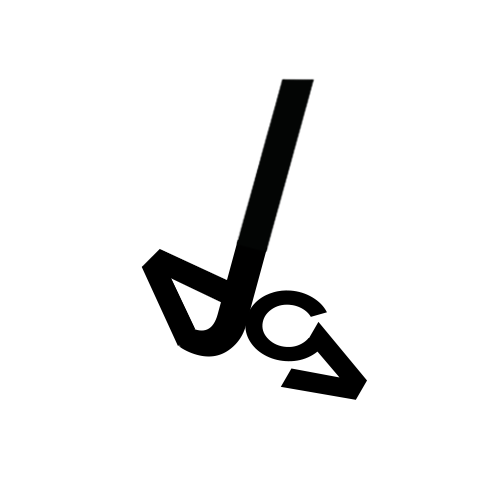
<style>
.page{position:relative;width:500px;height:500px;background:#ffffff}
.page>*{position:absolute;margin:0}
.t1{font:165.5px "Montserrat-ExtraBold";color:#000000}
.t2{font:137.4px "Cirqua-Regular";color:#000000}
.t3{font:144.7px "Montserrat-ExtraBold";color:#000000}
</style>
<div class="page">
<p class="t1" style="left:141px;top:248px;width:98px;height:98px;rotate:45deg">&lt;</p>
<p class="t2" style="left:245px;top:290px;width:82px;height:72px;rotate:4deg">C</p>
<p class="t3" style="left:280px;top:321px;width:87px;height:79px;rotate:30deg">&gt;</p>
</div>
